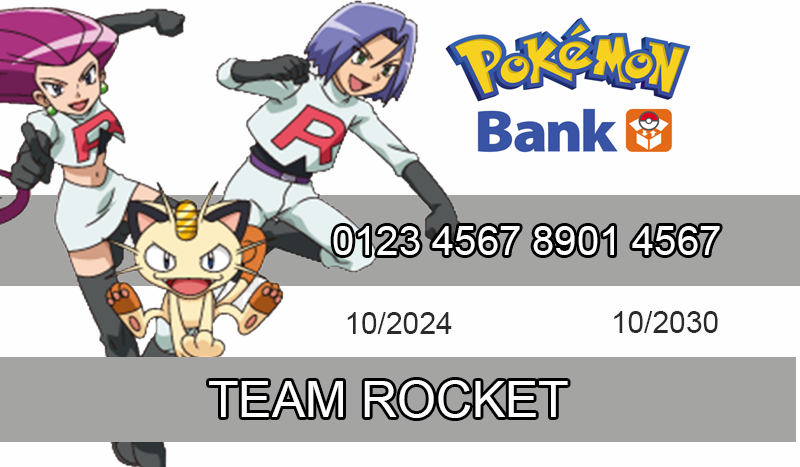
<style>
.page{position:relative;width:800px;height:467px;background:#fefefe}
.page>*{position:absolute;margin:0}
.t1{font:40px "ArialMT";color:#fefefe}
.t2{font:30px "ArialMT";color:#2a2a2a}
.t3{font:50px "ArialMT";color:#fdfdfd}
</style>
<div class="page">
<p class="t1" style="left:333px;top:226px;width:387px;height:29px">0123 4567 8901 4567</p>
<p class="t2" style="left:347px;top:312px;width:105px;height:22px">10/2024</p>
<p class="t2" style="left:614px;top:311px;width:104px;height:22px">10/2030</p>
<p class="t3" style="left:209px;top:380px;width:359px;height:38px">TEAM ROCKET</p>
</div>
